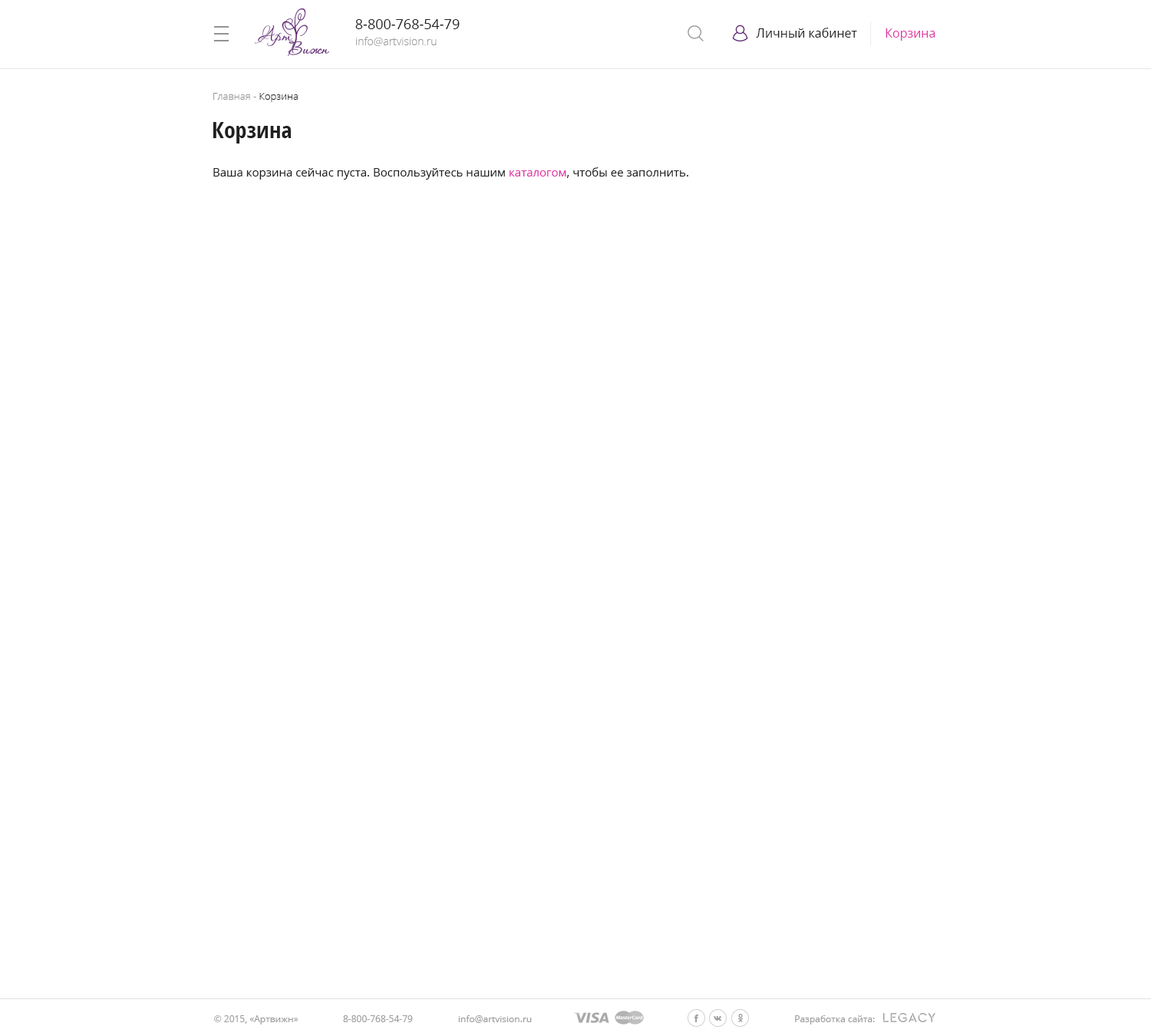
<style>
.page{position:relative;width:1151px;height:1036px;background:#ffffff}
.page>*{position:absolute;margin:0}
.t1{font:13.8px "OpenSans";color:#202020}
.t2{font:12.3px "OpenSans";color:#202020}
.t3{font:12.3px "OpenSans";color:#e233a6}
.t4{font:10.7px "OpenSans-Light";color:#999999}
.t5{font:10px "OpenSans-Light";color:#939393}
.t6{font:10px "OpenSans-Light";color:#202020}
.t7{font:23px "OpenSans-CondensedBold";color:#202020}
.t8{font:11.5px "OpenSans";color:#202020}
.t9{font:11.5px "OpenSans";color:#e233a6}
.t10{font:9.2px "OpenSans";color:#9e9d9d}
</style>
<div class="page">
<p class="t1" style="left:355px;top:19px;width:105px;height:10px">8-800-768-54-79</p>
<p class="t2" style="left:756px;top:28px;width:101px;height:10px">Личный кабинет</p>
<p class="t3" style="left:886px;top:28px;width:49px;height:13px">Корзина</p>
<p class="t4" style="left:356px;top:37px;width:81px;height:9px">info@artvision.ru</p>
<p class="t5" style="left:213px;top:93px;width:85px;height:9px">Главная - <span class="t6">Корзина</span></p>
<p class="t7" style="left:213px;top:122px;width:78px;height:21px">Корзина</p>
<p class="t8" style="left:213px;top:167px;width:475px;height:13px">Ваша корзина сейчас пуста. Воспользуйтесь нашим <span class="t9">каталогом</span>, чтобы ее заполнить.</p>
<p class="t10" style="left:214px;top:1015px;width:85px;height:9px">© 2015, «Артвижн»</p>
<p class="t10" style="left:343px;top:1015px;width:70px;height:7px">8-800-768-54-79</p>
<p class="t10" style="left:458px;top:1015px;width:74px;height:8px">info@artvision.ru</p>
<p class="t10" style="left:795px;top:1015px;width:80px;height:9px">Разработка сайта:</p>
</div>
